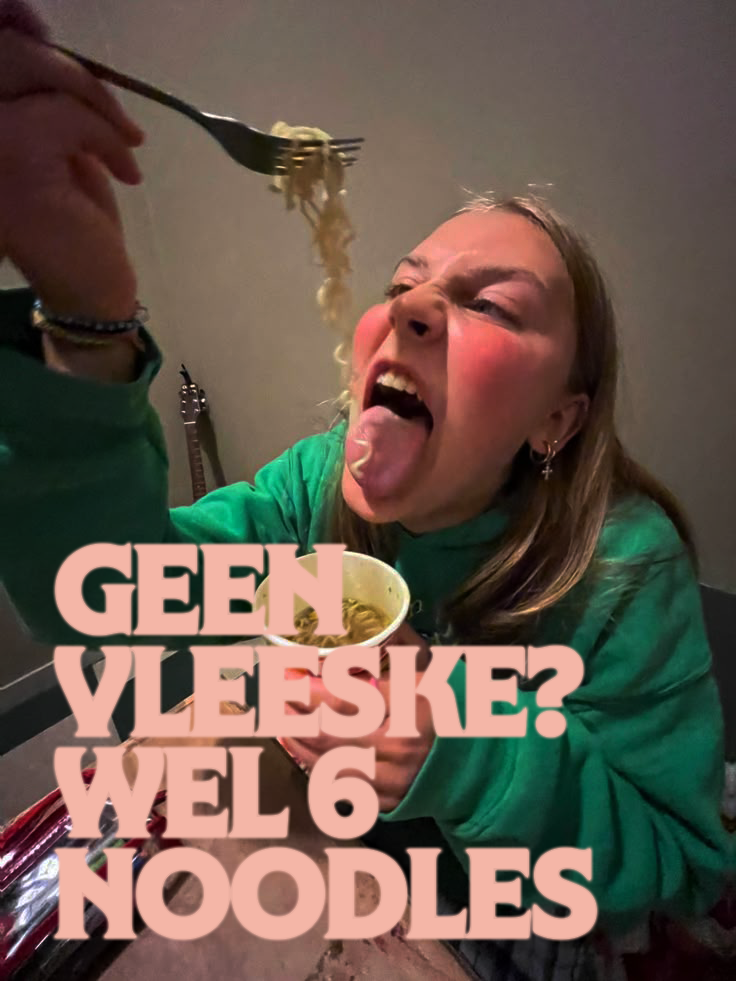
<style>
.page{position:relative;width:736px;height:981px}
.page>*{position:absolute;margin:0}
.t1{font:101.1px/101.1px "NYBotanicalGothic-Extrabold";letter-spacing:-0.02em;color:#f4b6a7;scale:1.04 1}
</style>
<div class="page">
<p class="t1" style="left:54px;top:543px;width:542px;height:395px">GEEN VLEESKE?<br>WEL 6<br>NOODLES</p>
</div>
